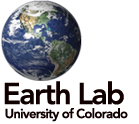
<style>
.page{position:relative;width:139px;height:124px;background:#ffffff}
.page>*{position:absolute;margin:0}
.t1{font:30px "Avenir-Heavy";letter-spacing:-0.05em;color:#110000}
.t2{font:13px "Avenir-Heavy";letter-spacing:-0.05em;color:#110000}
</style>
<div class="page">
<p class="t1" style="left:4px;top:81px;width:120px;height:24px">Earth Lab</p>
<p class="t2" style="left:5px;top:108px;width:123px;height:14px">University of Colorado</p>
</div>
